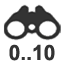
<style>
.page{position:relative;width:64px;height:64px;background:#ffffff}
.page>*{position:absolute;margin:0}
.t1{font:21px "Arial-BoldMT";color:#333333}
</style>
<div class="page">
<p class="t1" style="left:9px;top:44px;width:46px;height:17px">0..10</p>
</div>
